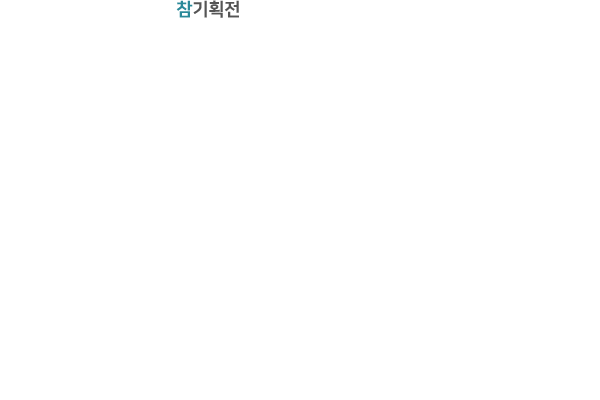
<style>
.page{position:relative;width:600px;height:400px;background:#ffffff}
.page>*{position:absolute;margin:0}
.t1{font:18px "NanumSquareEB";letter-spacing:-0.02em;color:#555555}
.t2{font:18px "NanumSquareEB";letter-spacing:-0.02em;color:#2a8999}
</style>
<div class="page">
<p class="t1" style="left:176px;top:0px;width:63px;height:18px"><span class="t2">참</span>기획전</p>
</div>
